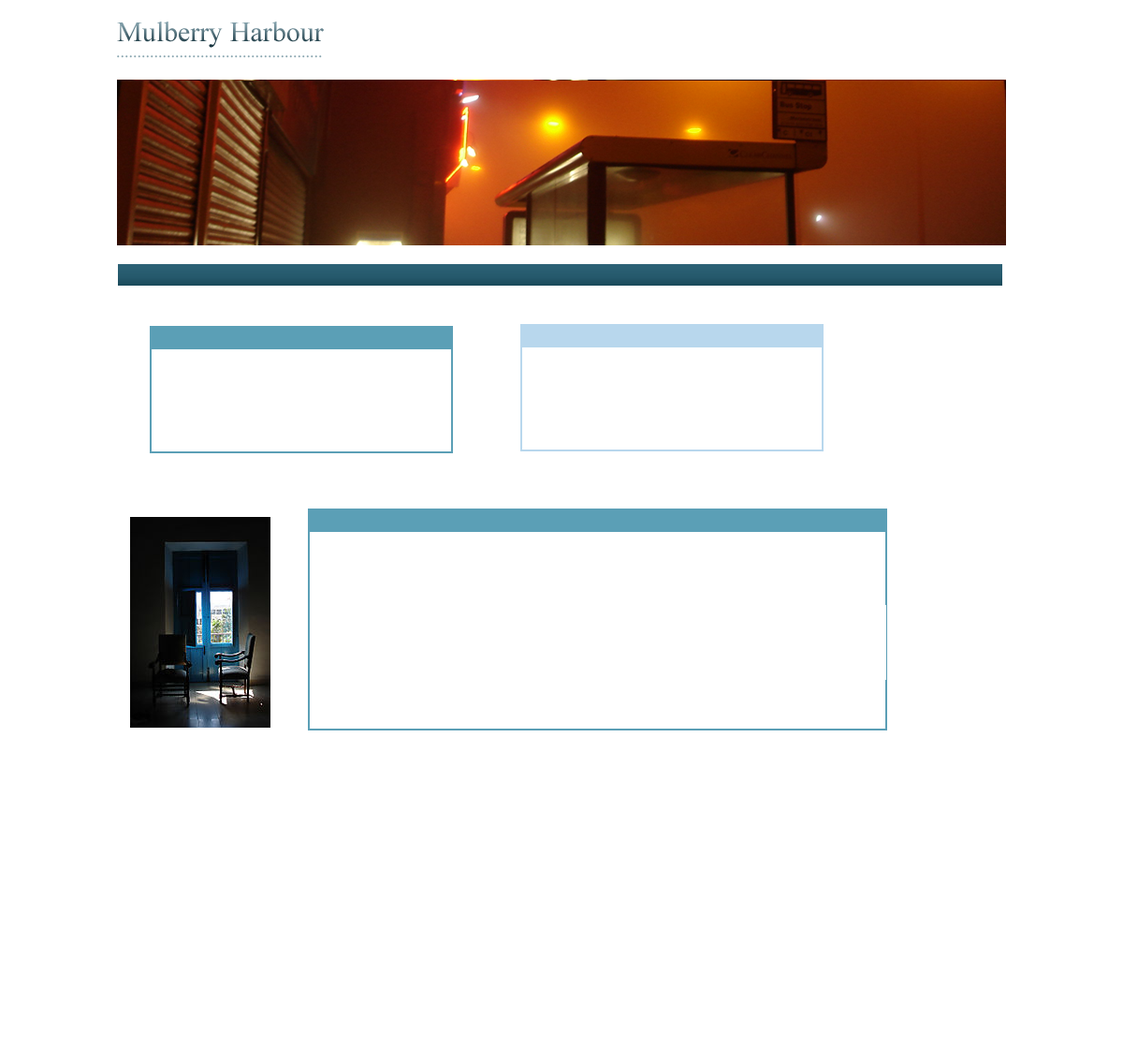
<style>
.page{position:relative;width:1123px;height:1062px;background:#ffffff}
.page>*{position:absolute;margin:0}
.t1{font:28.1px "TimesNewRomanPSMT"}
.t2{font:16.8px "TimesNewRomanPSMT";color:#87a4ae}
</style>
<div class="page">
<p class="t1" style="left:117px;top:22px;width:207px;height:26px">Mulberry Harbour</p>
<p class="t2" style="left:117px;top:55px;width:205px;height:3px">.................................................</p>
</div>
